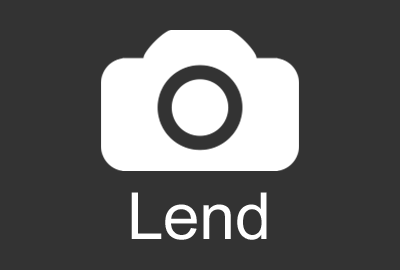
<style>
.page{position:relative;width:400px;height:270px;background:#333333}
.page>*{position:absolute;margin:0}
.t1{font:65px "ArialMT";color:#ffffff}
</style>
<div class="page">
<p class="t1" style="left:131px;top:192px;width:136px;height:48px">Lend</p>
</div>
